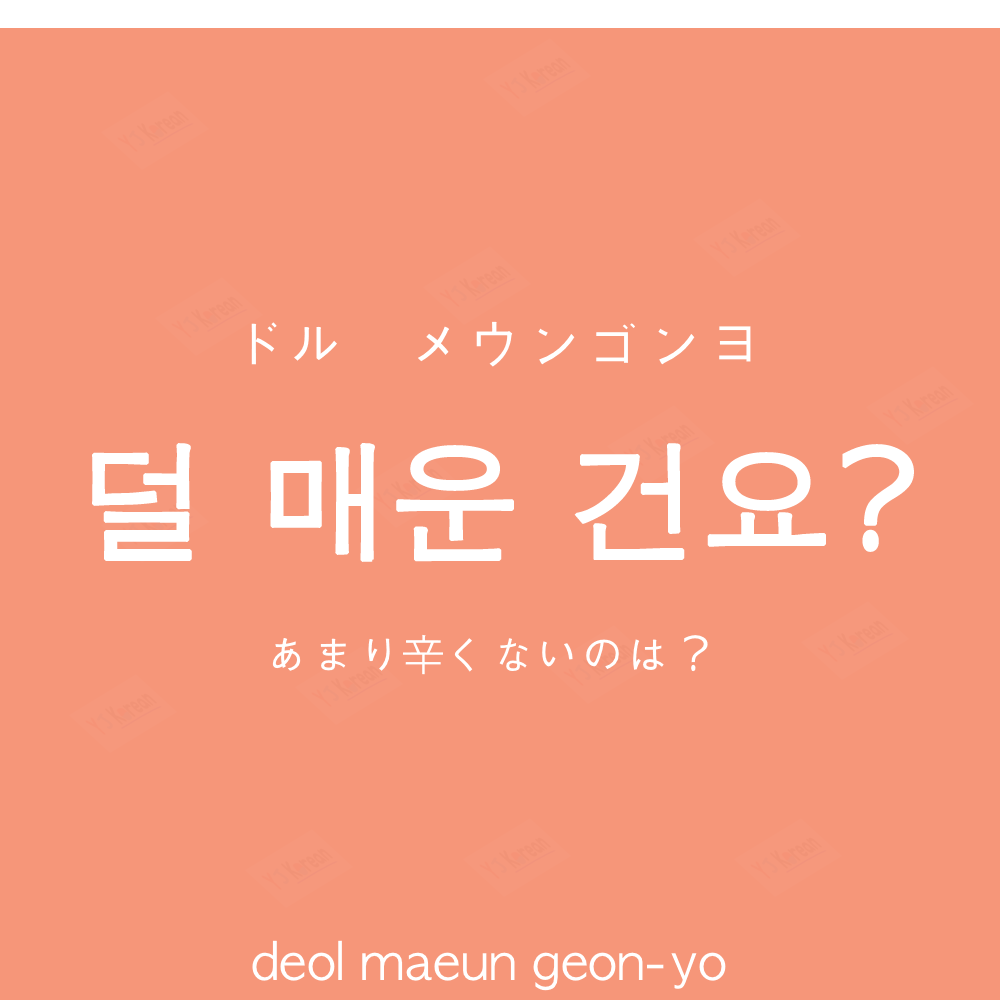
<style>
.page{position:relative;width:1000px;height:1000px;background:#f69679}
.page>*{position:absolute;margin:0}
.t1{font:60px "AppleGothic";color:#ffffff}
.t2{font:130px "AppleGothic";color:#ffffff;font-weight:bold}
.t3{font:45px "AppleGothic";color:#ffffff}
.t4{font:50px "AppleGothic";color:#ffffff}
</style>
<div class="page">
<p class="t1" style="left:251px;top:321px;width:500px;height:46px">ドル　メウンゴンヨ</p>
<p class="t2" style="left:92px;top:443px;width:822px;height:119px">덜 매운 건요?</p>
<p class="t3" style="left:272px;top:634px;width:436px;height:41px">あまり辛くないのは？</p>
<p class="t4" style="left:252px;top:940px;width:474px;height:51px">deol maeun geon-yo</p>
</div>
